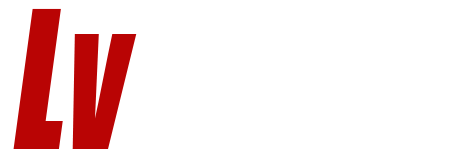
<style>
.page{position:relative;width:454px;height:159px;background:#ffffff}
.page>*{position:absolute;margin:0}
.t1{font:177.2px "Impact";color:#b90404;font-style:italic;scale:0.77 1}
</style>
<div class="page">
<p class="t1" style="left:13px;top:8px;width:124px;height:141px">Lv</p>
</div>
